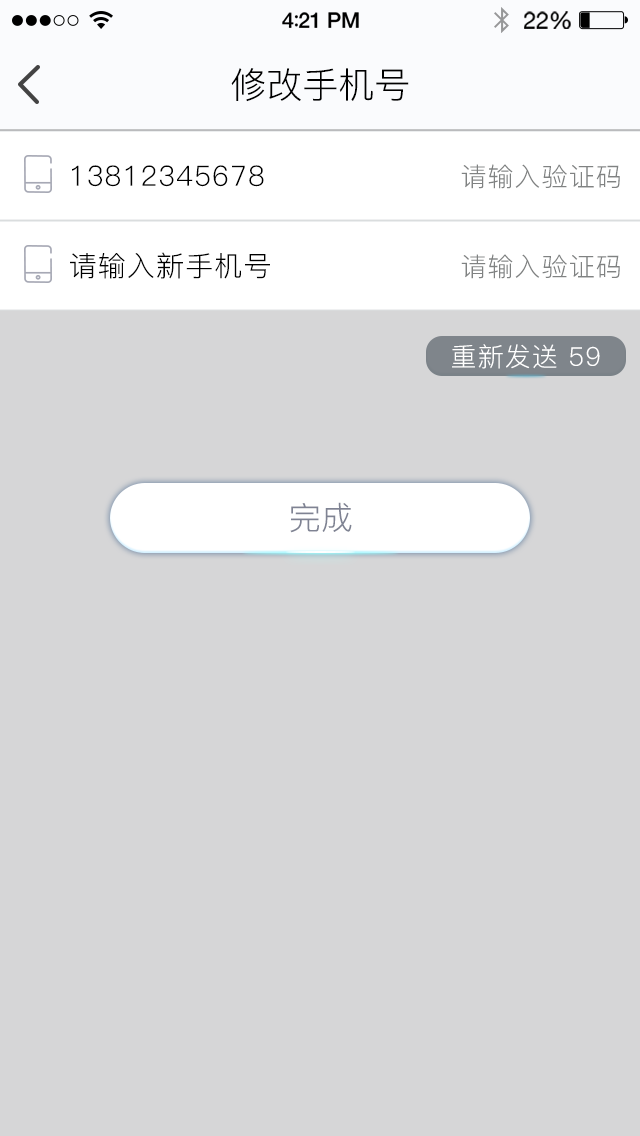
<style>
.page{position:relative;width:640px;height:1136px;background:#d6d6d7}
.page>*{position:absolute;margin:0}
.t1{font:36px "PingFang-SC-Regular";color:#000000}
.t2{font:28px "PingFang-SC-Regular";letter-spacing:0.04em;color:#000000}
.t3{font:26px "PingFang-SC-Regular";letter-spacing:0.04em;color:#808282}
.t4{font:26px "PingFang-SC-Regular";letter-spacing:0.04em;color:#ffffff}
.t5{font:32px "PingFang-SC-Regular";color:#7f8393}
</style>
<div class="page">
<p class="t1" style="left:231px;top:68px;width:178px;height:34px">修改手机号</p>
<p class="t2" style="left:72px;top:165px;width:192px;height:22px">13812345678</p>
<p class="t3" style="left:461px;top:164px;width:159px;height:25px">请输入验证码</p>
<p class="t2" style="left:70px;top:252px;width:200px;height:27px">请输入新手机号</p>
<p class="t3" style="left:461px;top:254px;width:159px;height:25px">请输入验证码</p>
<p class="t4" style="left:452px;top:344px;width:148px;height:25px">重新发送 59</p>
<p class="t5" style="left:290px;top:502px;width:62px;height:31px">完成</p>
</div>
